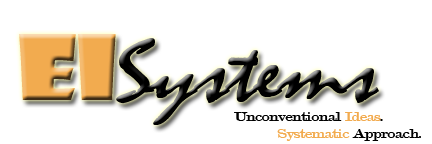
<style>
.page{position:relative;width:432px;height:144px;background:#ffffff}
.page>*{position:absolute;margin:0}
.t1{font:88px "Mistral";letter-spacing:-0.02em;color:#000000;scale:1.25 1}
.t2{font:88px "ShowcardGothic-Reg";letter-spacing:-0.02em;color:#f2ab4f;scale:1.25 1}
.t3{font:14px "Modern-Regular";letter-spacing:-0.02em;color:#000000;scale:1.25 1}
.t4{font:14px "Modern-Regular";letter-spacing:-0.02em;color:#f2ab4f;scale:1.25 1}
</style>
<div class="page">
<p class="t1" style="left:19px;top:34px;width:360px;height:91px"><span class="t2">EI</span>Systems</p>
<p class="t3" style="left:234px;top:112px;width:187px;height:29px">Unconventional <span class="t4">Ideas</span>.<br><span class="t4">           Systematic</span> Approach.</p>
</div>
